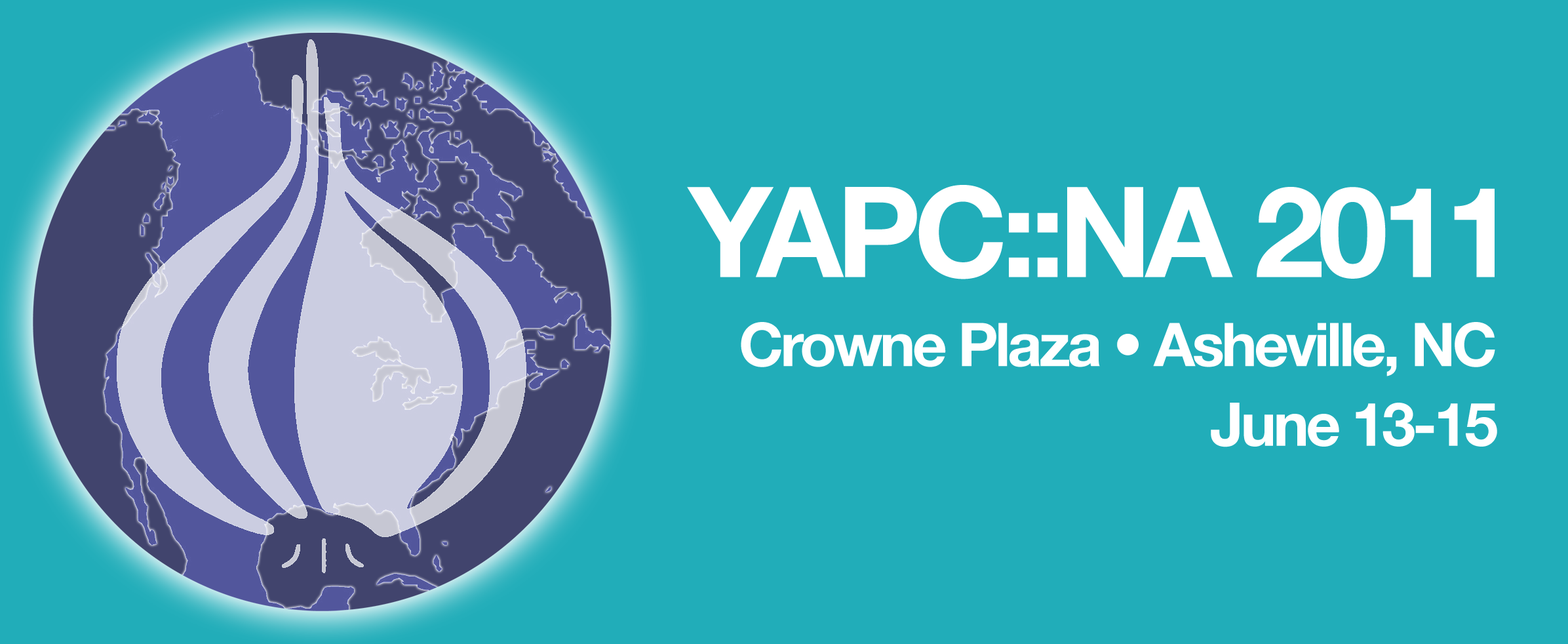
<style>
.page{position:relative;width:1568px;height:644px;background:#21adb9}
.page>*{position:absolute;margin:0}
.t1{font:125.9px "HelveticaNeue-Bold";letter-spacing:-0.05em;color:#ffffff}
.t2{font:60.3px "HelveticaNeue-Bold";letter-spacing:-0.05em;color:#ffffff}
</style>
<div class="page">
<p class="t1" style="left:687px;top:185px;width:808px;height:94px">YAPC::NA 2011</p>
<p class="t2" style="left:741px;top:322px;width:754px;height:54px">Crowne Plaza • Asheville, NC</p>
<p class="t2" style="left:1211px;top:402px;width:286px;height:45px">June 13-15</p>
</div>
